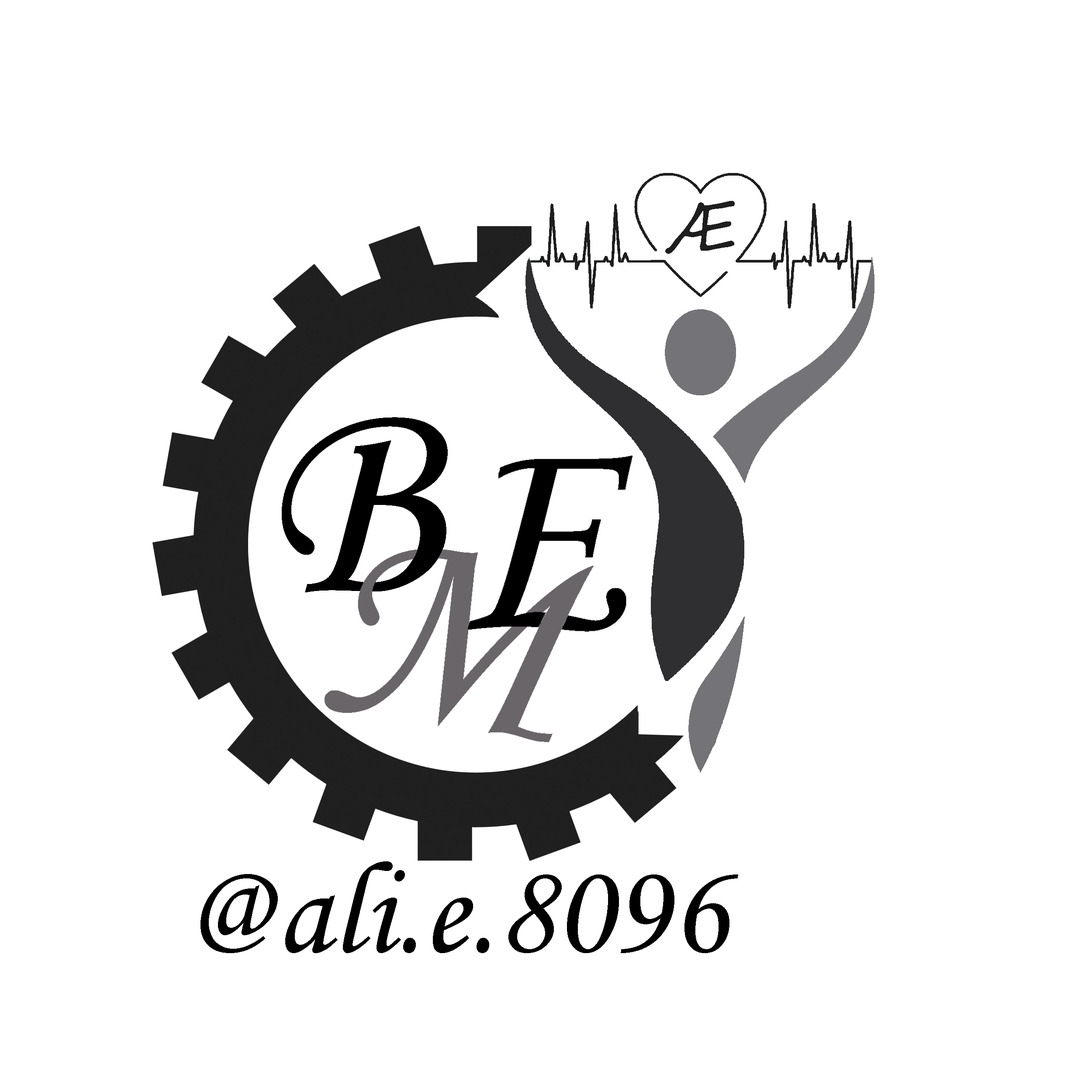
<style>
.page{position:relative;width:1092px;height:1092px;background:#ffffff}
.page>*{position:absolute;margin:0}
.t1{font:64.1px "SegoePrint";color:#1e1e1e}
.t2{font:292.4px "MonotypeCorsiva";color:#000000}
.t3{font:131px "MonotypeCorsiva";color:#000000}
</style>
<div class="page">
<p class="t1" style="left:665px;top:201px;width:70px;height:53px;rotate:-4deg">Æ</p>
<p class="t2" style="left:282px;top:417px;width:166px;height:175px">B</p>
<p class="t3" style="left:200px;top:861px;width:538px;height:92px">ali.e.8096@</p>
</div>
